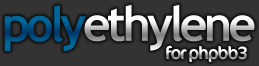
<style>
.page{position:relative;width:259px;height:66px;background:#333333}
.page>*{position:absolute;margin:0}
.t1{font:48px "TrebuchetMS-Bold";letter-spacing:-0.075em;color:#006699}
.t2{font:48px "TrebuchetMS-Bold";letter-spacing:-0.075em}
.t3{font:18px "Cocon-Regular";letter-spacing:-0.075em}
</style>
<div class="page">
<p class="t1" style="left:4px;top:5px;width:82px;height:46px">poly</p>
<p class="t2" style="left:84px;top:4px;width:171px;height:47px">ethylene</p>
<p class="t3" style="left:166px;top:45px;width:81px;height:17px">for phpbb3</p>
</div>
